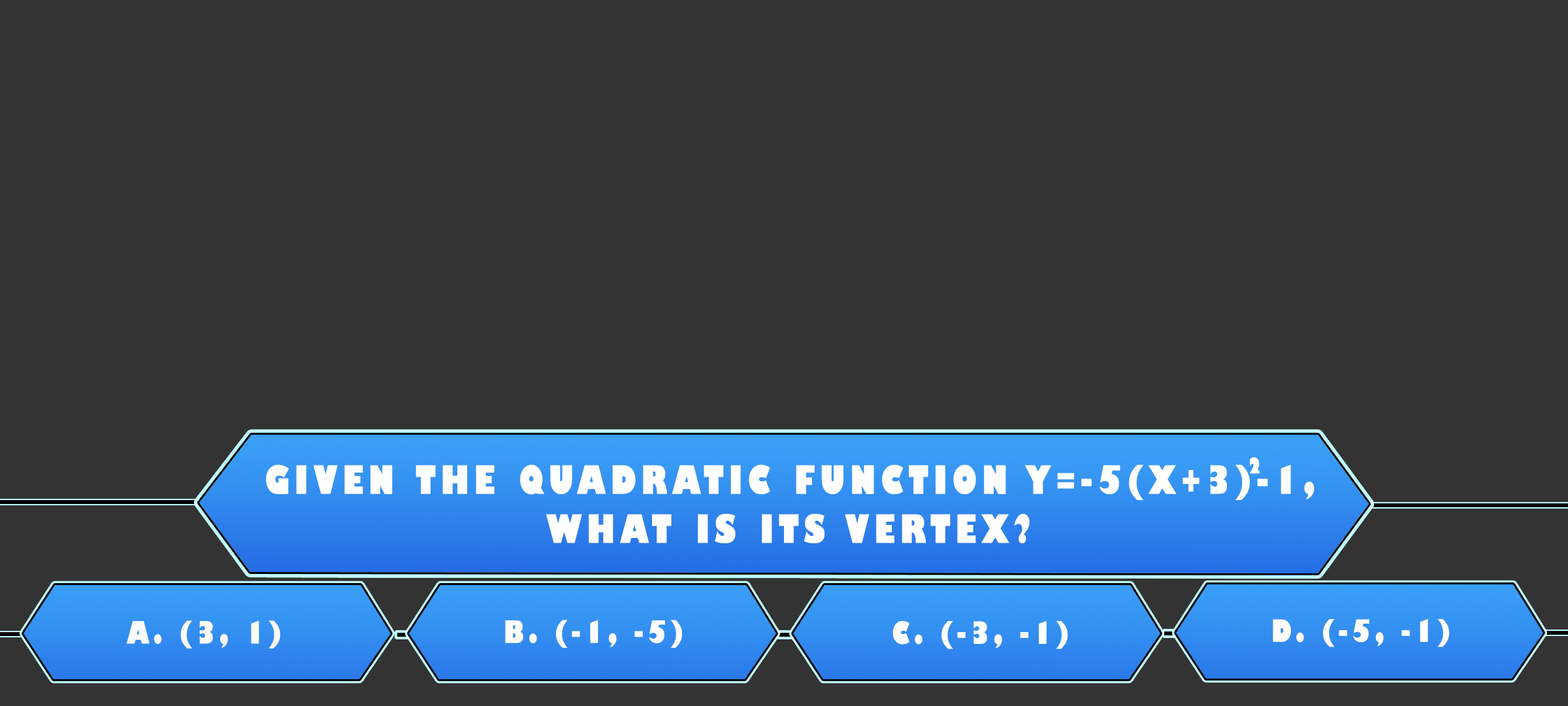
<style>
.page{position:relative;width:1568px;height:706px;background:#333333}
.page>*{position:absolute;margin:0}
.t1{font:21.1px "GillSans-UltraBoldCondensed";letter-spacing:0.115em;color:#ffffff;text-transform:uppercase;scale:1.11 1}
.t2{font:38.1px/49px "GillSans-UltraBoldCondensed";letter-spacing:0.115em;color:#ffffff;text-transform:uppercase;scale:1.12 1}
.t3{font:29.9px "GillSans-UltraBoldCondensed";letter-spacing:0.115em;color:#fcfbfb;text-transform:uppercase;scale:1.12 1}
.t4{font:29.9px "GillSans-UltraBoldCondensed";letter-spacing:0.115em;color:#fefcfc;text-transform:uppercase;scale:1.12 1}
.t5{font:29.9px "GillSans-UltraBoldCondensed";letter-spacing:0.115em;color:#fffefe;text-transform:uppercase;scale:1.12 1}
</style>
<div class="page">
<p class="t1" style="left:1249px;top:457px;width:11px;height:17px">2</p>
<p class="t2" style="left:266px;top:465px;width:1049px;height:78px;text-align:center">Given the quadratic function y=-5(x+3)-1,<br>what is its vertex?</p>
<p class="t3" style="left:127px;top:620px;width:153px;height:28px">a. (3, 1)</p>
<p class="t4" style="left:505px;top:619px;width:177px;height:28px">b. (-1, -5)</p>
<p class="t5" style="left:892px;top:621px;width:176px;height:28px">c. (-3, -1)</p>
<p class="t4" style="left:1273px;top:619px;width:176px;height:28px">d. (-5, -1)</p>
</div>
